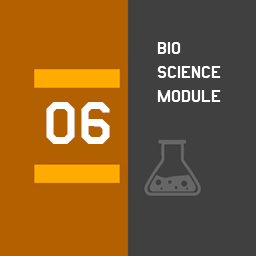
<style>
.page{position:relative;width:256px;height:256px;background:#404040}
.page>*{position:absolute;margin:0}
.t1{font:20px "AmarilloUSAF";color:#ffffff}
.t2{font:70px "AmarilloUSAF";color:#ffffff}
</style>
<div class="page">
<p class="t1" style="left:157px;top:42px;width:64px;height:60px">bio<br>science<br>module</p>
<p class="t2" style="left:46px;top:102px;width:64px;height:42px">06</p>
</div>
